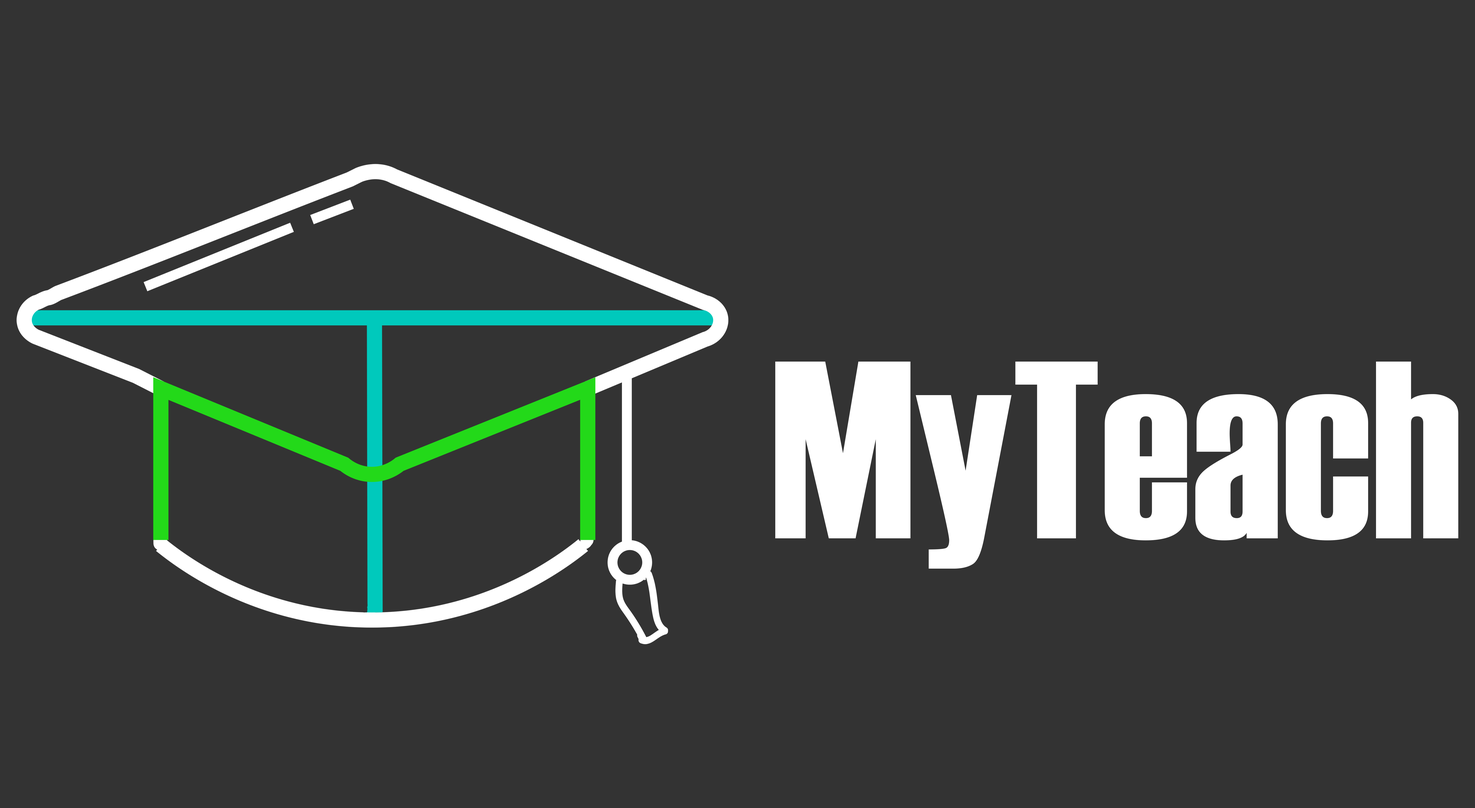
<style>
.page{position:relative;width:1475px;height:808px;background:#333333}
.page>*{position:absolute;margin:0}
.t1{font:252.6px "Haettenschweiler";color:#ffffff}
</style>
<div class="page">
<p class="t1" style="left:775px;top:362px;width:684px;height:207px">MyTeach</p>
</div>
